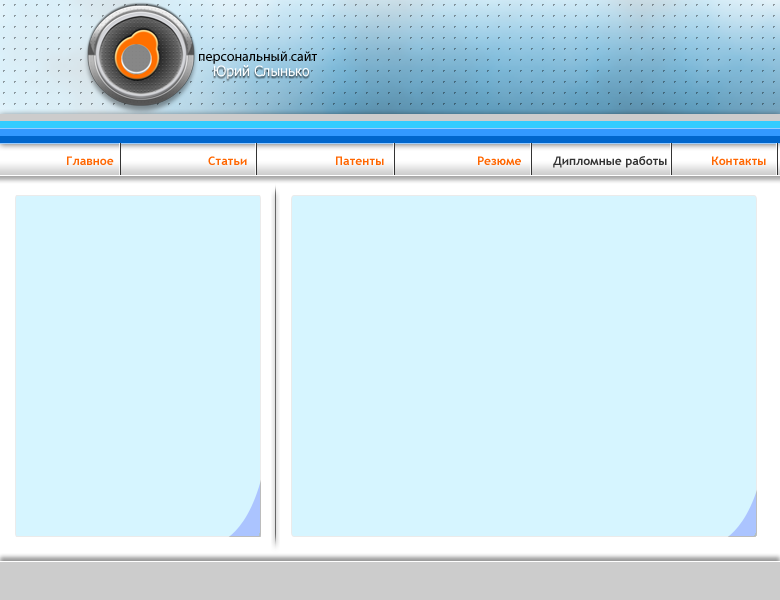
<style>
.page{position:relative;width:780px;height:600px;background:#d6f5ff}
.page>*{position:absolute;margin:0}
.t1{font:14px "MyriadPro-Regular";color:#000000}
.t2{font:14px "Tahoma";color:#ffffff}
.t3{font:12px "TrebuchetMS-Bold";color:#ff6600}
.t4{font:12px "TrebuchetMS-Bold";color:#333333}
</style>
<div class="page">
<p class="t1" style="left:199px;top:51px;width:118px;height:13px">персональный сайт</p>
<p class="t2" style="left:214px;top:65px;width:95px;height:14px">Юрий Слынько</p>
<p class="t3" style="left:67px;top:156px;width:47px;height:9px">Главное</p>
<p class="t3" style="left:208px;top:156px;width:39px;height:9px">Статьи</p>
<p class="t3" style="left:336px;top:156px;width:48px;height:9px">Патенты</p>
<p class="t3" style="left:478px;top:156px;width:43px;height:9px">Резюме</p>
<p class="t4" style="left:553px;top:156px;width:114px;height:12px">Дипломные работы</p>
<p class="t3" style="left:712px;top:156px;width:54px;height:9px">Контакты</p>
</div>
